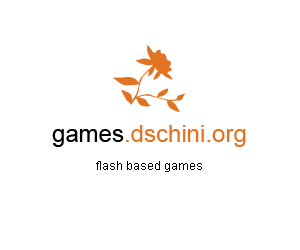
<style>
.page{position:relative;width:300px;height:250px;background:#ffffff}
.page>*{position:absolute;margin:0}
.t1{font:24px "ArialMT";color:#e17423}
.t2{font:24px "ArialMT";color:#000000}
.t3{font:12px "ArialMT";color:#000000}
</style>
<div class="page">
<p class="t1" style="left:52px;top:125px;width:194px;height:22px"><span class="t2">games</span>.dschini.org</p>
<p class="t3" style="left:96px;top:161px;width:106px;height:11px">flash based games</p>
</div>
